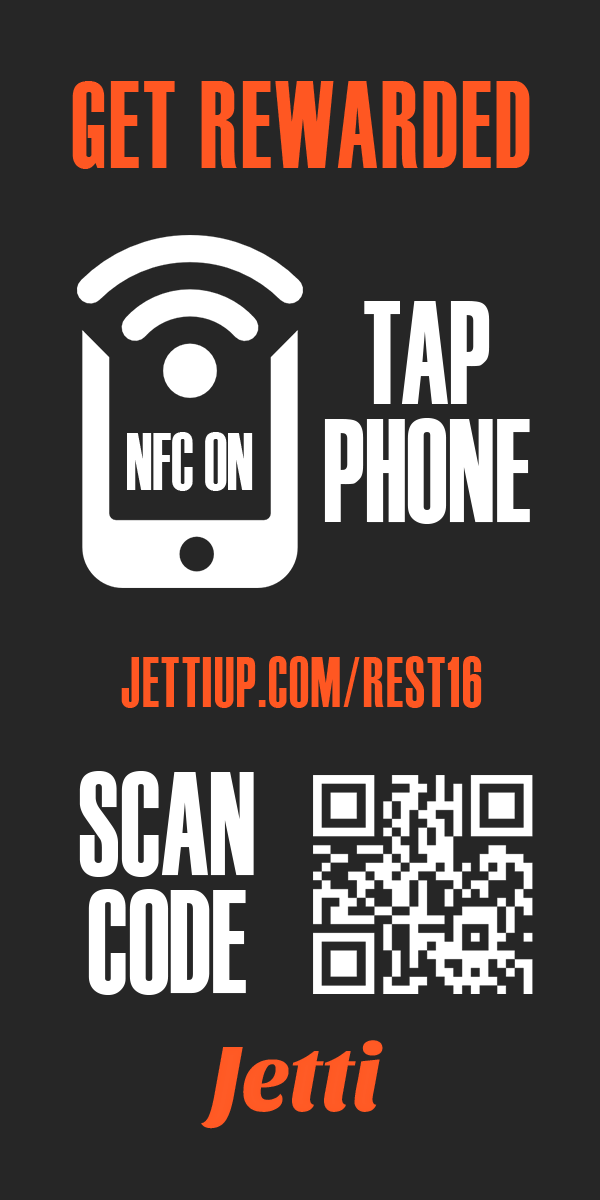
<style>
.page{position:relative;width:600px;height:1200px;background:#262626}
.page>*{position:absolute;margin:0}
.t1{font:123.8px "Haettenschweiler";letter-spacing:0.04em;color:#ff5722;text-transform:uppercase;scale:0.75 1}
.t2{font:147.2px/117.9px "Haettenschweiler";color:#ffffff;scale:0.74 1}
.t3{font:82.5px "Haettenschweiler";color:#ffffff;scale:0.74 1}
.t4{font:70.8px "Haettenschweiler";letter-spacing:0.04em;color:#ff5722;text-transform:uppercase;scale:0.74 1}
.t5{font:95.6px "SansitaOne";letter-spacing:-0.01em;color:#ff5722;scale:0.95 1}
</style>
<div class="page">
<p class="t1" style="left:72px;top:81px;width:458px;height:88px">Get rewarded</p>
<p class="t2" style="left:324px;top:301px;width:206px;height:223px;text-align:center">TAP<br>PHONE</p>
<p class="t3" style="left:127px;top:432px;width:126px;height:59px">NFC ON</p>
<p class="t4" style="left:121px;top:656px;width:361px;height:52px">jettiup.com/rest16</p>
<p class="t2" style="left:79px;top:771px;width:175px;height:224px;text-align:center">SCAN<br>CODE</p>
<p class="t5" style="left:201px;top:1040px;width:182px;height:89px">Jetti</p>
</div>
